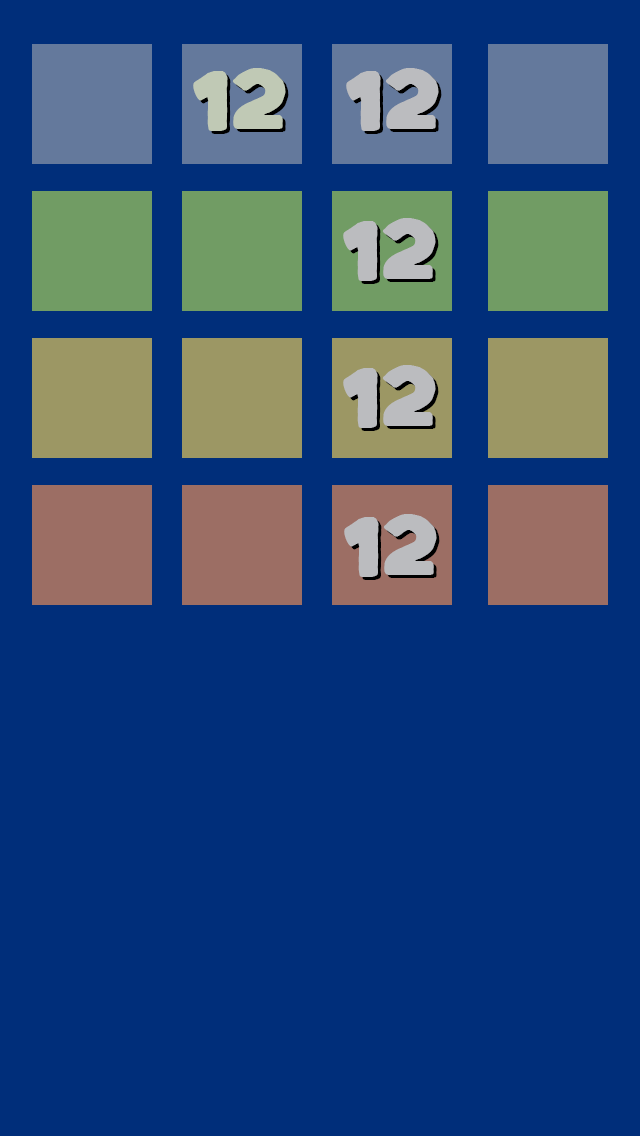
<style>
.page{position:relative;width:640px;height:1136px;background:#002e7a}
.page>*{position:absolute;margin:0}
.t1{font:66.7px "Kaph-Regular";color:#c0c9b5}
.t2{font:66.7px "Kaph-Regular";color:#bbbcbf}
</style>
<div class="page">
<p class="t1" style="left:193px;top:68px;width:93px;height:63px">12</p>
<p class="t2" style="left:346px;top:68px;width:93px;height:63px">12</p>
<p class="t2" style="left:343px;top:218px;width:93px;height:63px">12</p>
<p class="t2" style="left:343px;top:365px;width:93px;height:63px">12</p>
<p class="t2" style="left:344px;top:514px;width:93px;height:63px">12</p>
</div>
